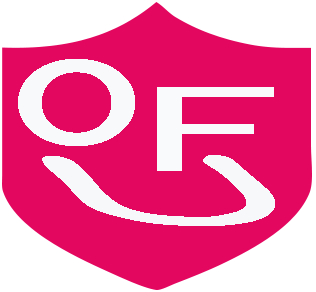
<style>
.page{position:relative;width:316px;height:292px;background:#e3075f}
.page>*{position:absolute;margin:0}
.t1{font:192.8px "MS-PGothic";color:#f7f9fb;scale:1.44 1}
.t2{font:229.4px "SegoePrint";color:#f6f8fa;font-variant:small-caps;font-weight:bold;font-style:italic;scale:3.41 1}
</style>
<div class="page">
<p class="t1" style="left:18px;top:59px;width:117px;height:87px">o</p>
<p class="t2" style="left:42px;top:155px;width:233px;height:71px;rotate:180deg">u</p>
</div>
